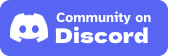
<style>
.page{position:relative;width:176px;height:56px;background:#5865f2}
.page>*{position:absolute;margin:0}
.t1{font:14px "AtkinsonHyperlegible-Bold";color:#ffffff}
.t2{font:20px "DelaGothicOne-Regular";color:#ffffff}
</style>
<div class="page">
<p class="t1" style="left:56px;top:11px;width:95px;height:14px">Community on</p>
<p class="t2" style="left:55px;top:26px;width:93px;height:18px">Discord</p>
</div>
